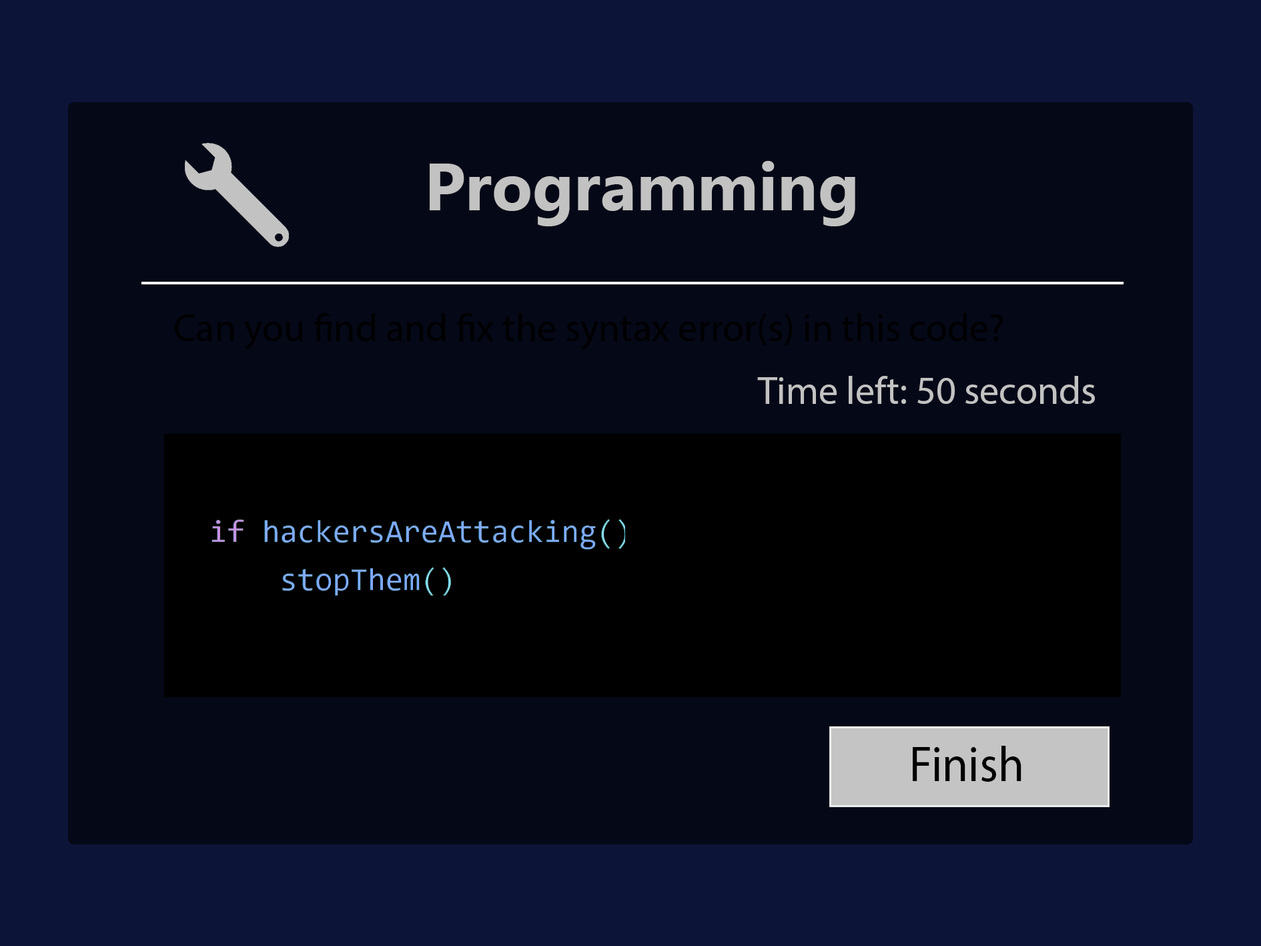
<style>
.page{position:relative;width:1261px;height:946px;background:#050817}
.page>*{position:absolute;margin:0}
.t1{font:66.7px "Ebrima-Bold";color:#c2c2c2}
.t2{font:38.9px "MyriadPro-Regular";color:#000000}
.t3{font:38.9px "MyriadPro-Regular";color:#c2c2c2}
.t4{font:50px "MyriadPro-Regular";color:#000000;scale:0.94 1}
</style>
<div class="page">
<p class="t1" style="left:430px;top:161px;width:425px;height:65px">Programming</p>
<p class="t2" style="left:175px;top:313px;width:828px;height:37px">Can you find and fix the syntax error(s) in this code?</p>
<p class="t3" style="left:757px;top:376px;width:338px;height:28px">Time left: 50 seconds</p>
<p class="t4" style="left:913px;top:745px;width:109px;height:36px">Finish</p>
</div>
